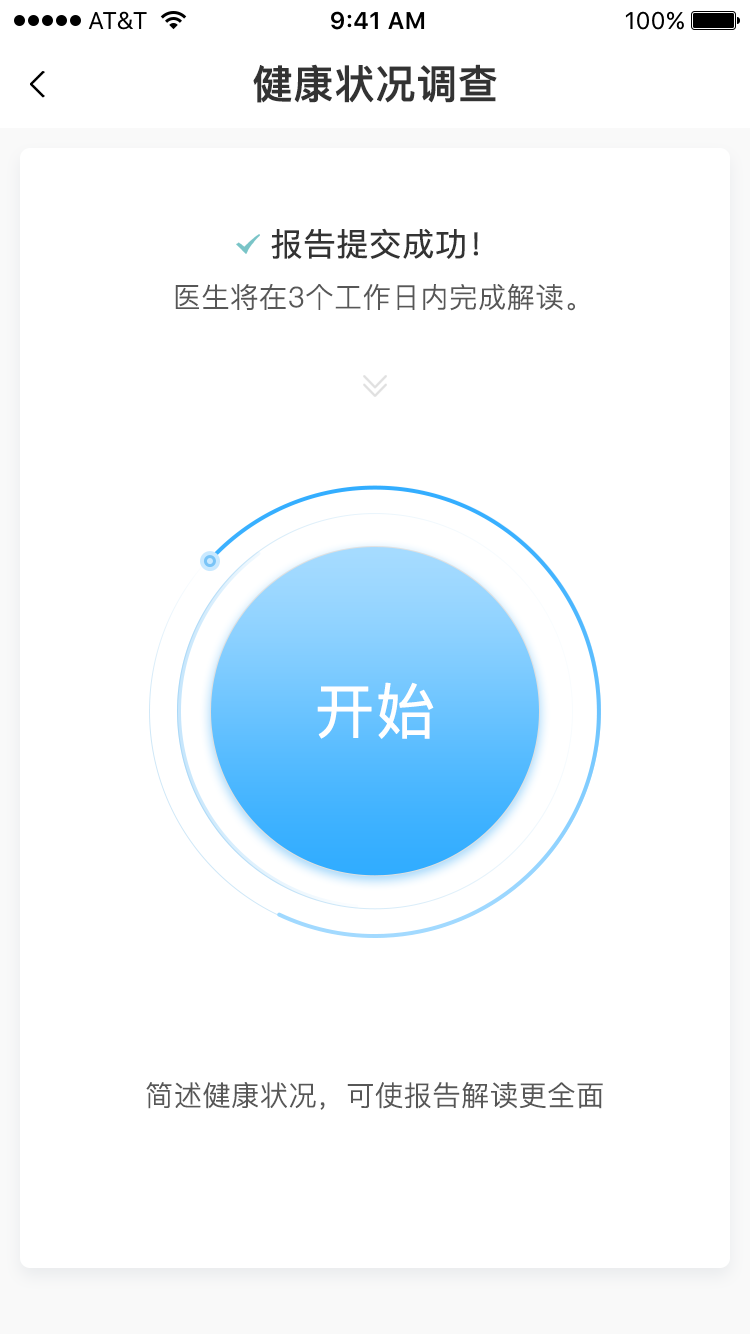
<style>
.page{position:relative;width:750px;height:1334px;background:#ffffff}
.page>*{position:absolute;margin:0}
.t1{font:40px "PingFangSC-Medium";color:#333333;font-weight:bold}
.t2{font:32px "PingFangSC-Regular";color:#333333;font-weight:bold}
.t3{font:28px "PingFangSC-Light";color:#575757;font-weight:bold}
.t4{font:60px "PingFangSC-Regular";color:#ffffff;font-weight:bold}
</style>
<div class="page">
<p class="t1" style="left:253px;top:64px;width:244px;height:39px">健康状况调查</p>
<p class="t2" style="left:271px;top:228px;width:207px;height:31px">报告提交成功！</p>
<p class="t3" style="left:175px;top:283px;width:400px;height:28px">医生将在3个工作日内完成解读。</p>
<p class="t4" style="left:317px;top:682px;width:117px;height:57px">开始</p>
<p class="t3" style="left:146px;top:1082px;width:457px;height:28px">简述健康状况，可使报告解读更全面</p>
</div>
